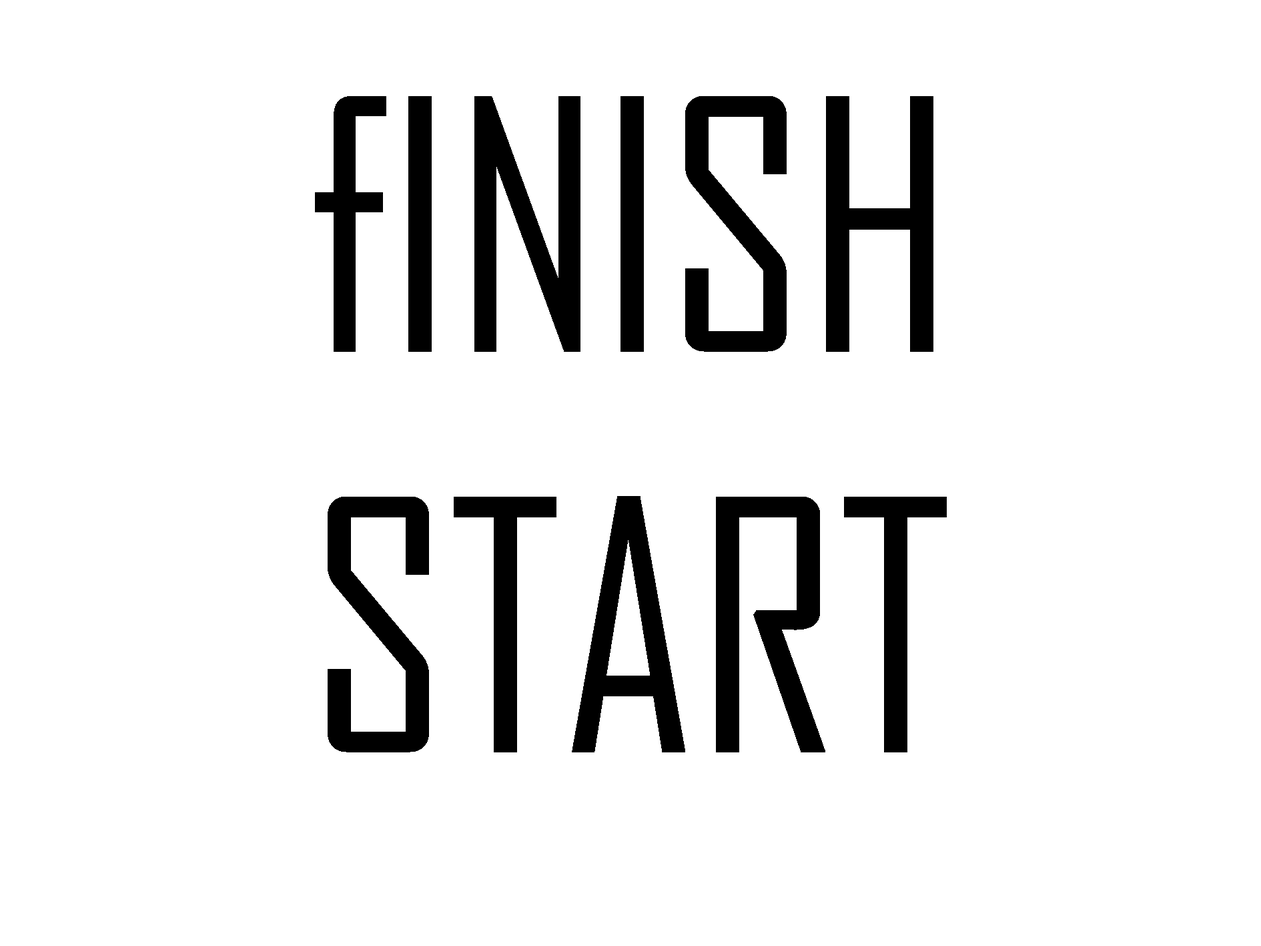
<style>
.page{position:relative;width:1261px;height:946px;background:#ffffff}
.page>*{position:absolute;margin:0}
.t1{font:333.6px "AgencyFB-Reg";color:#000000}
</style>
<div class="page">
<p class="t1" style="left:315px;top:96px;width:632px;height:656px;text-align:center">fINISH<br>START</p>
</div>
